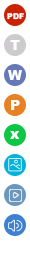
<style>
.page{position:relative;width:30px;height:256px;background:#ffffff}
.page>*{position:absolute;margin:0}
.t1{font:8px "Arial-Black";color:#ffffff}
.t2{font:14px "Arial-Black";color:#ffffff}
</style>
<div class="page">
<p class="t1" style="left:7px;top:13px;width:17px;height:7px">PDF</p>
<p class="t2" style="left:10px;top:40px;width:10px;height:10px">T</p>
<p class="t2" style="left:8px;top:70px;width:14px;height:10px">W</p>
<p class="t2" style="left:11px;top:100px;width:9px;height:10px">P</p>
<p class="t2" style="left:10px;top:131px;width:10px;height:8px">x</p>
</div>
